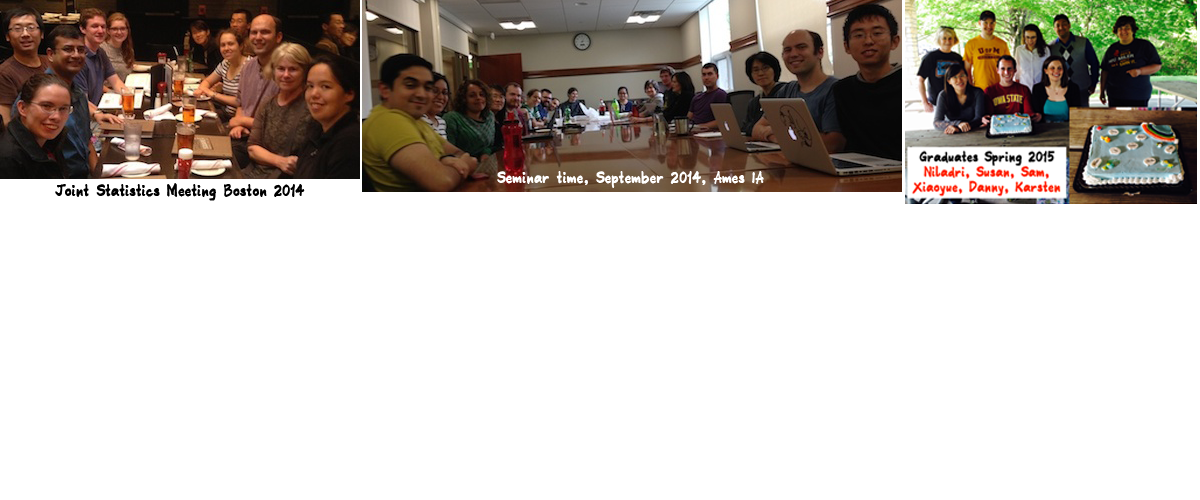
<style>
.page{position:relative;width:1200px;height:500px;background:#ffffff}
.page>*{position:absolute;margin:0}
.t1{font:14px "DidyBold";color:#ffffff}
.t2{font:14px "DidyBold";color:#000000}
</style>
<div class="page">
<p class="t1" style="left:497px;top:171px;width:267px;height:17px">Seminar time, September 2014, Ames IA</p>
<p class="t2" style="left:55px;top:183px;width:250px;height:18px">Joint Statistics Meeting Boston 2014</p>
</div>
